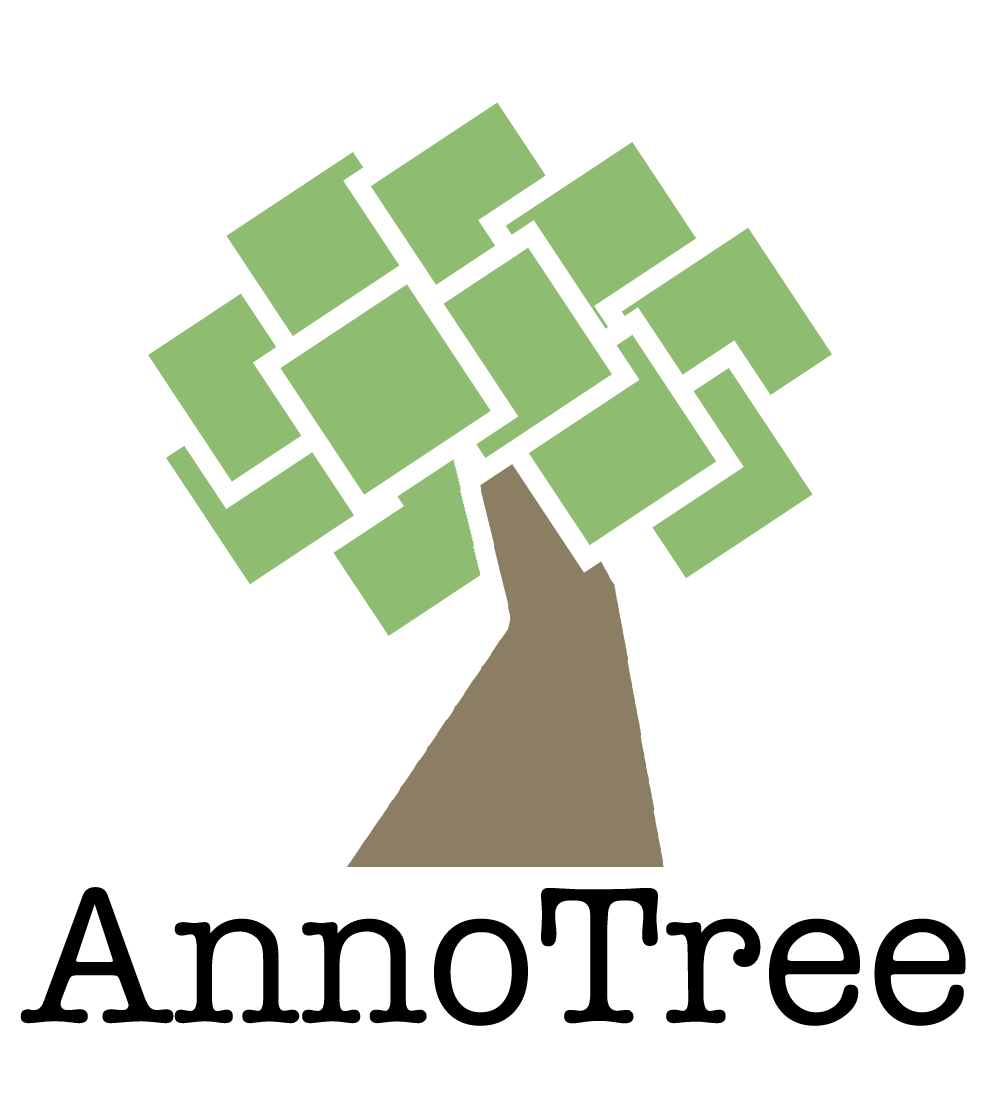
<style>
.page{position:relative;width:994px;height:1100px;background:#ffffff}
.page>*{position:absolute;margin:0}
.t1{font:200px "AmericanTypewriter";color:#000000}
</style>
<div class="page">
<p class="t1" style="left:20px;top:887px;width:946px;height:139px">AnnoTree</p>
</div>
